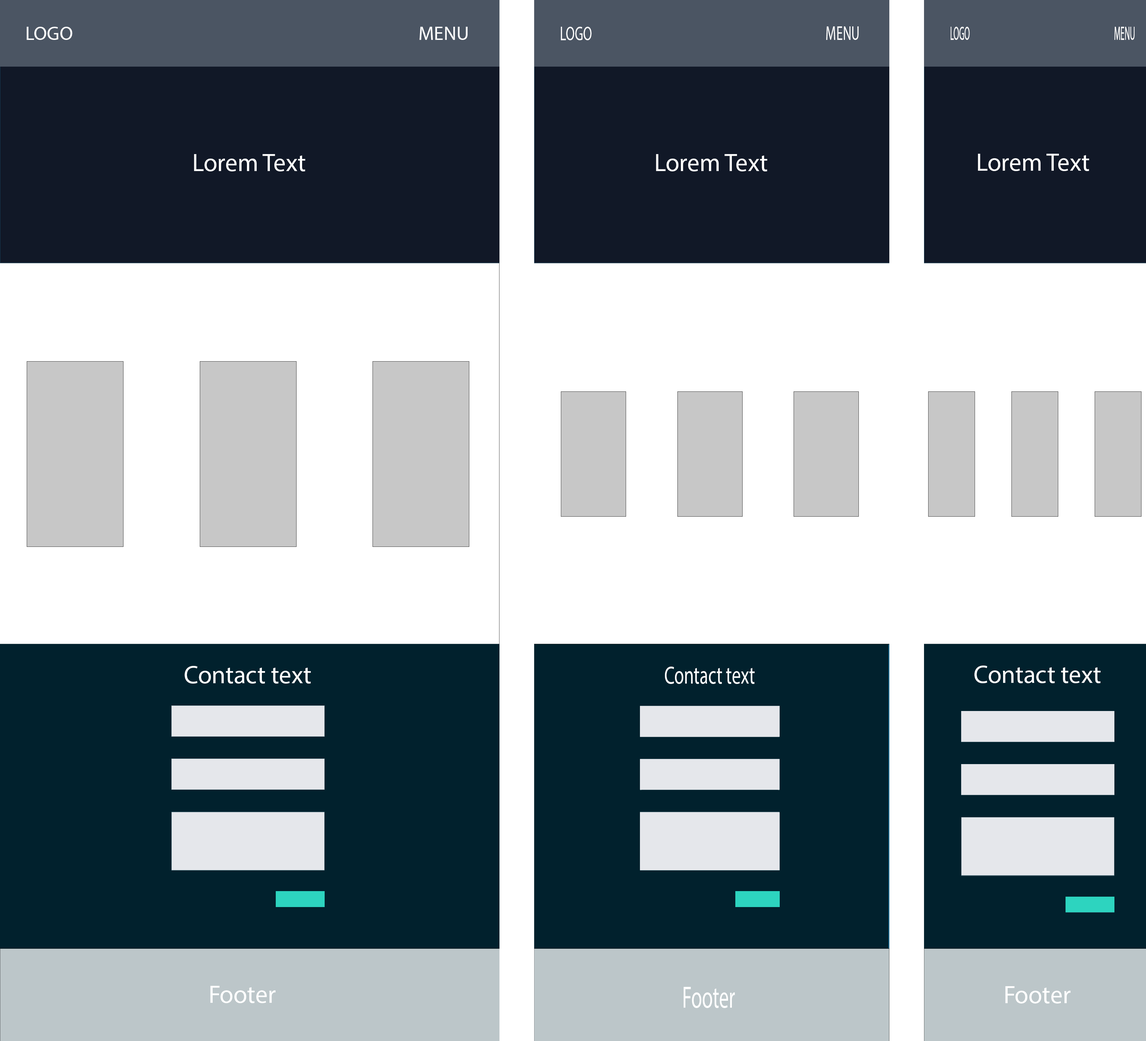
<style>
.page{position:relative;width:1146px;height:1041px;background:#ffffff}
.page>*{position:absolute;margin:0}
.t1{font:19.4px "MyriadPro-Regular";color:#ffffff}
.t2{font:19.6px "MyriadPro-Regular";color:#ffffff;scale:0.67 1}
.t3{font:19.4px "MyriadPro-Regular";color:#ffffff;scale:0.42 1}
.t4{font:25px "MyriadPro-Regular";color:#ffffff}
.t5{font:24.9px "MyriadPro-Regular";color:#ffffff;scale:0.71 1}
.t6{font:30.9px "MyriadPro-Regular";color:#ffffff;scale:0.64 1}
</style>
<div class="page">
<p class="t1" style="left:27px;top:27px;width:45px;height:13px">LOGO</p>
<p class="t1" style="left:419px;top:27px;width:49px;height:13px">MENU</p>
<p class="t2" style="left:561px;top:27px;width:31px;height:13px">LOGO</p>
<p class="t2" style="left:826px;top:26px;width:33px;height:14px">MENU</p>
<p class="t3" style="left:950px;top:27px;width:20px;height:13px">LOGO</p>
<p class="t3" style="left:1114px;top:27px;width:21px;height:13px">MENU</p>
<p class="t4" style="left:194px;top:154px;width:111px;height:17px">Lorem Text</p>
<p class="t4" style="left:656px;top:154px;width:111px;height:17px">Lorem Text</p>
<p class="t4" style="left:978px;top:154px;width:111px;height:17px">Lorem Text</p>
<p class="t4" style="left:185px;top:666px;width:126px;height:17px">Contact text</p>
<p class="t4" style="left:974px;top:665px;width:127px;height:18px">Contact text</p>
<p class="t5" style="left:665px;top:666px;width:90px;height:18px">Contact text</p>
<p class="t4" style="left:210px;top:985px;width:66px;height:18px">Footer</p>
<p class="t6" style="left:684px;top:986px;width:51px;height:22px">Footer</p>
<p class="t4" style="left:1005px;top:986px;width:66px;height:17px">Footer</p>
</div>
